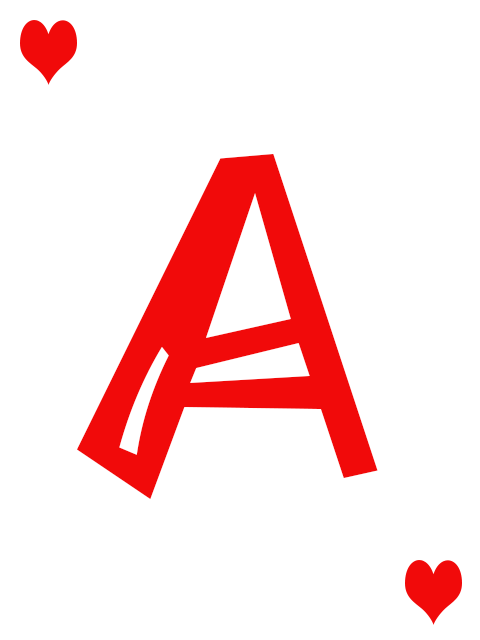
<style>
.page{position:relative;width:480px;height:640px;background:#ffffff}
.page>*{position:absolute;margin:0}
.t1{font:386.3px "Jokerman-Regular";color:#f10a0a}
</style>
<div class="page">
<p class="t1" style="left:76px;top:154px;width:302px;height:345px">A</p>
</div>
